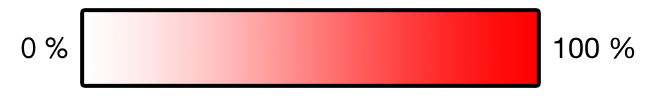
<style>
.page{position:relative;width:650px;height:96px;background:#ffffff}
.page>*{position:absolute;margin:0}
.t1{font:28.8px "Avenir-Roman";color:#000000}
.t2{font:28.8px "HelveticaNeue";color:#000000}
</style>
<div class="page">
<p class="t1" style="left:21px;top:36px;width:47px;height:23px">0 %</p>
<p class="t2" style="left:554px;top:37px;width:81px;height:22px">100 %</p>
</div>
